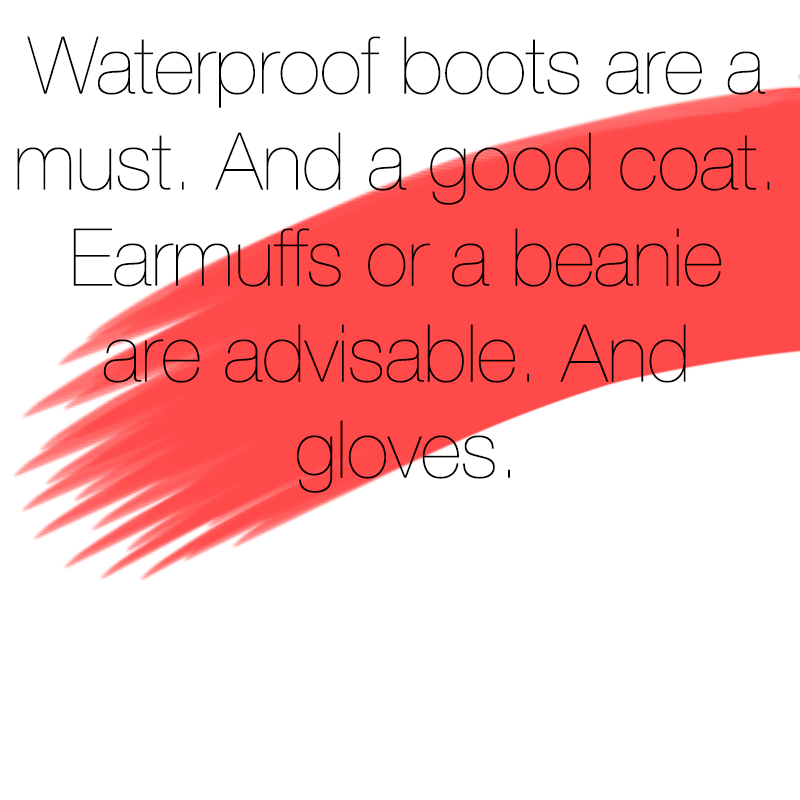
<style>
.page{position:relative;width:800px;height:800px;background:#ffffff}
.page>*{position:absolute;margin:0}
.t1{font:80px "HelveticaNeue-UltraLight";color:#000000}
</style>
<div class="page">
<p class="t1" style="left:17px;top:36px;width:753px;height:457px;text-align:center">Waterproof boots are a <br>must. And a good coat. <br>Earmuffs or a beanie <br>are advisable. And <br>gloves.</p>
</div>
